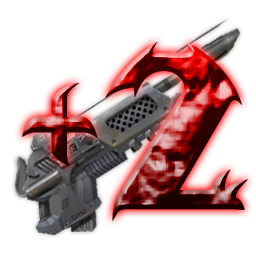
<style>
.page{position:relative;width:256px;height:256px;background:#ffffff}
.page>*{position:absolute;margin:0}
.t1{font:223.3px "UnrealTournament";scale:0.89 1}
</style>
<div class="page">
<p class="t1" style="left:22px;top:41px;width:226px;height:180px">+2</p>
</div>
